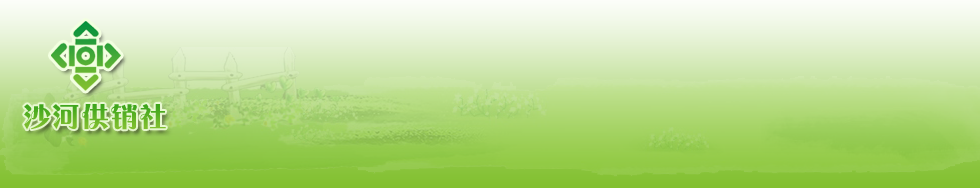
<style>
.page{position:relative;width:980px;height:188px}
.page>*{position:absolute;margin:0}
.t1{font:29.2px "FZCHYJW--GB1-0"}
</style>
<div class="page">
<p class="t1" style="left:24px;top:104px;width:142px;height:26px">沙河供销社</p>
</div>
